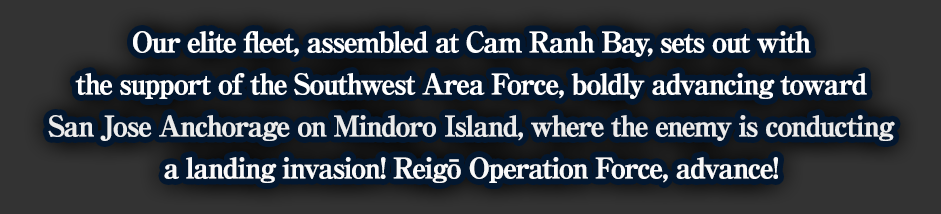
<style>
.page{position:relative;width:941px;height:214px;background:#333333}
.page>*{position:absolute;margin:0}
.t1{font:28px/42px "RyuminPro-ExBold";letter-spacing:-0.08em;color:#ffffff;font-weight:bold}
</style>
<div class="page">
<p class="t1" style="left:48px;top:31px;width:847px;height:152px;text-align:center">Our elite fleet, assembled at Cam Ranh Bay, sets out with<br>the support of the Southwest Area Force, boldly advancing toward<br>San Jose Anchorage on Mindoro Island, where the enemy is conducting<br>a landing invasion! Reigō Operation Force, advance!</p>
</div>
